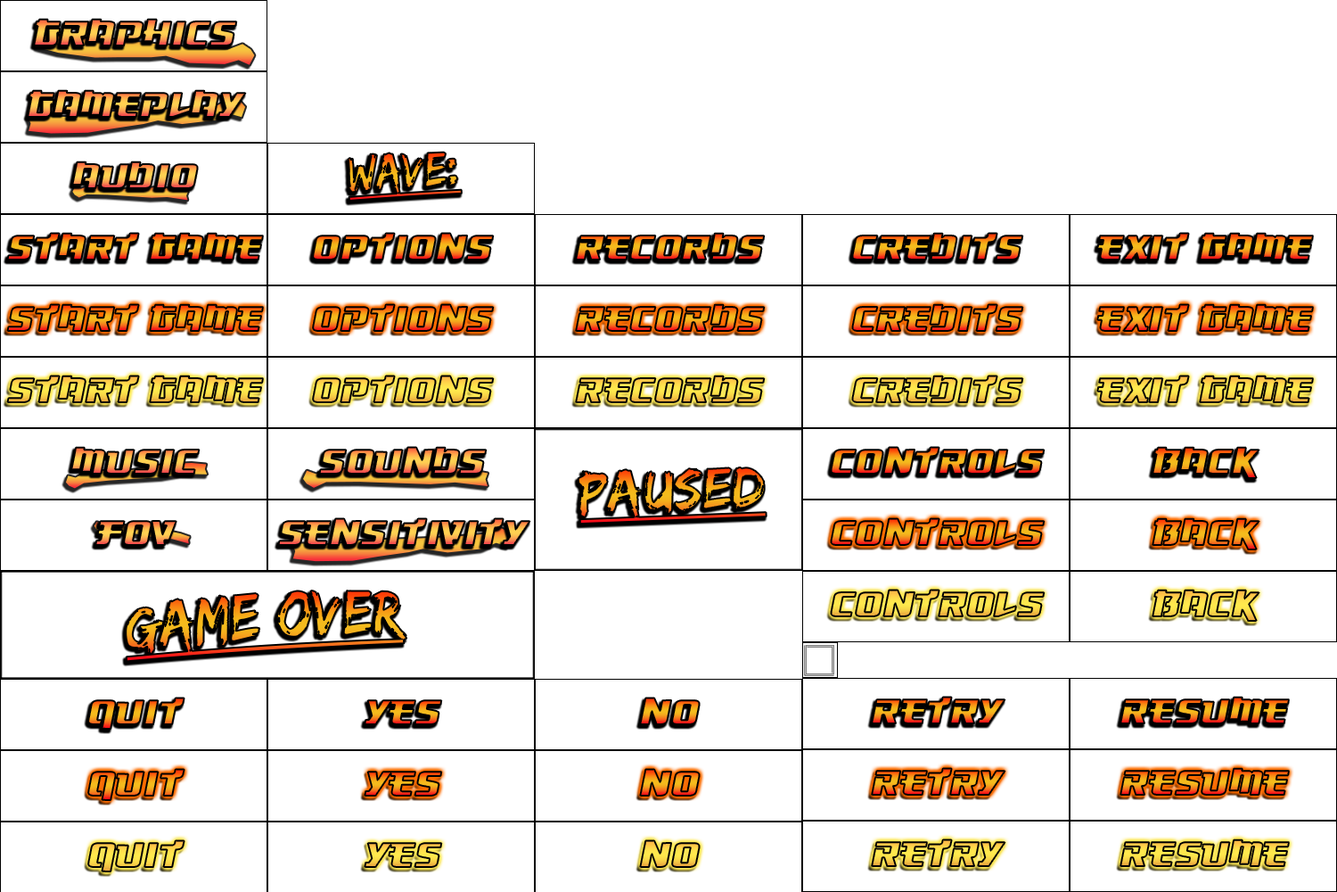
<style>
.page{position:relative;width:1337px;height:892px;background:#ffffff}
.page>*{position:absolute;margin:0}
.t1{font:44.6px "Osaka-SansSerif"}
.t2{font:436.1px "BlackadderITC-Regular"}
.t3{font:44px "EdoSZ";text-decoration:underline}
.t4{font:230.9px "BlackadderITC-Regular"}
.t5{font:282.9px "BlackadderITC-Regular"}
.t6{font:59.4px "EdoSZ";text-decoration:underline}
.t7{font:438.6px "BlackadderITC-Regular"}
</style>
<div class="page">
<p class="t1" style="left:34px;top:19px;width:203px;height:26px">Graphics</p>
<p class="t2" style="left:37px;top:31px;width:218px;height:34px;rotate:5deg">_</p>
<p class="t1" style="left:28px;top:90px;width:218px;height:27px">Gameplay</p>
<p class="t1" style="left:72px;top:161px;width:126px;height:27px">Audio</p>
<p class="t3" style="left:348px;top:152px;width:114px;height:49px;rotate:-4deg">Wave:</p>
<p class="t4" style="left:72px;top:186px;width:116px;height:15px;rotate:-177deg">_</p>
<p class="t1" style="left:7px;top:233px;width:256px;height:26px">Start Game</p>
<p class="t1" style="left:313px;top:233px;width:181px;height:26px">options</p>
<p class="t1" style="left:576px;top:233px;width:189px;height:26px">records</p>
<p class="t1" style="left:852px;top:233px;width:172px;height:26px">Credits</p>
<p class="t1" style="left:1098px;top:233px;width:215px;height:26px">Exit Game</p>
<p class="t1" style="left:71px;top:447px;width:129px;height:26px">Music</p>
<p class="t1" style="left:319px;top:447px;width:168px;height:26px">Sounds</p>
<p class="t1" style="left:831px;top:447px;width:214px;height:26px">Controls</p>
<p class="t1" style="left:1153px;top:447px;width:107px;height:31px">Back</p>
<p class="t5" style="left:65px;top:463px;width:143px;height:26px;rotate:175deg">_</p>
<p class="t6" style="left:578px;top:467px;width:189px;height:57px;rotate:-2deg">Paused</p>
<p class="t1" style="left:95px;top:521px;width:82px;height:24px">FOV</p>
<p class="t1" style="left:278px;top:518px;width:253px;height:27px">Sensitivity</p>
<p class="t7" style="left:292px;top:526px;width:220px;height:36px;rotate:-3deg">_</p>
<p class="t6" style="left:126px;top:590px;width:281px;height:72px;rotate:-4deg">Game Over</p>
<p class="t1" style="left:88px;top:697px;width:97px;height:31px">Quit</p>
<p class="t1" style="left:365px;top:700px;width:77px;height:24px">Yes</p>
<p class="t1" style="left:640px;top:697px;width:60px;height:27px">NO</p>
<p class="t1" style="left:872px;top:696px;width:134px;height:27px">Retry</p>
<p class="t1" style="left:1121px;top:696px;width:168px;height:27px">Resume</p>
<p class="t1" style="left:88px;top:840px;width:97px;height:31px">Quit</p>
</div>
